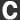
<style>
.page{position:relative;width:20px;height:20px;background:#333333}
.page>*{position:absolute;margin:0}
.t1{font:27.1px "FranklinGothic-Medium";color:#ffffff;font-weight:bold}
</style>
<div class="page">
<p class="t1" style="left:2px;top:1px;width:16px;height:19px">C</p>
</div>
